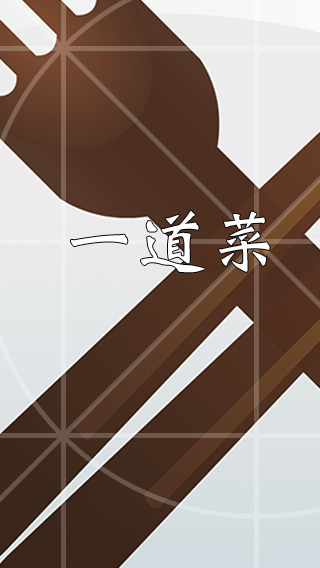
<style>
.page{position:relative;width:320px;height:568px}
.page>*{position:absolute;margin:0}
.t1{font:72px "Weibei-SC-Bold";color:#fefefe}
</style>
<div class="page">
<p class="t1" style="left:70px;top:210px;width:200px;height:63px">一道菜</p>
</div>
